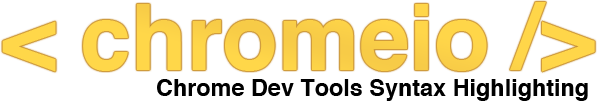
<style>
.page{position:relative;width:597px;height:101px;background:#ffffff}
.page>*{position:absolute;margin:0}
.t1{font:91px "Helvetica-Bold";color:#fed549}
.t2{font:23.4px "Helvetica-Bold";color:#000000}
</style>
<div class="page">
<p class="t1" style="left:2px;top:2px;width:593px;height:70px">&lt; chromeio /&gt;</p>
<p class="t2" style="left:157px;top:79px;width:431px;height:22px">Chrome Dev Tools Syntax Highlighting</p>
</div>
